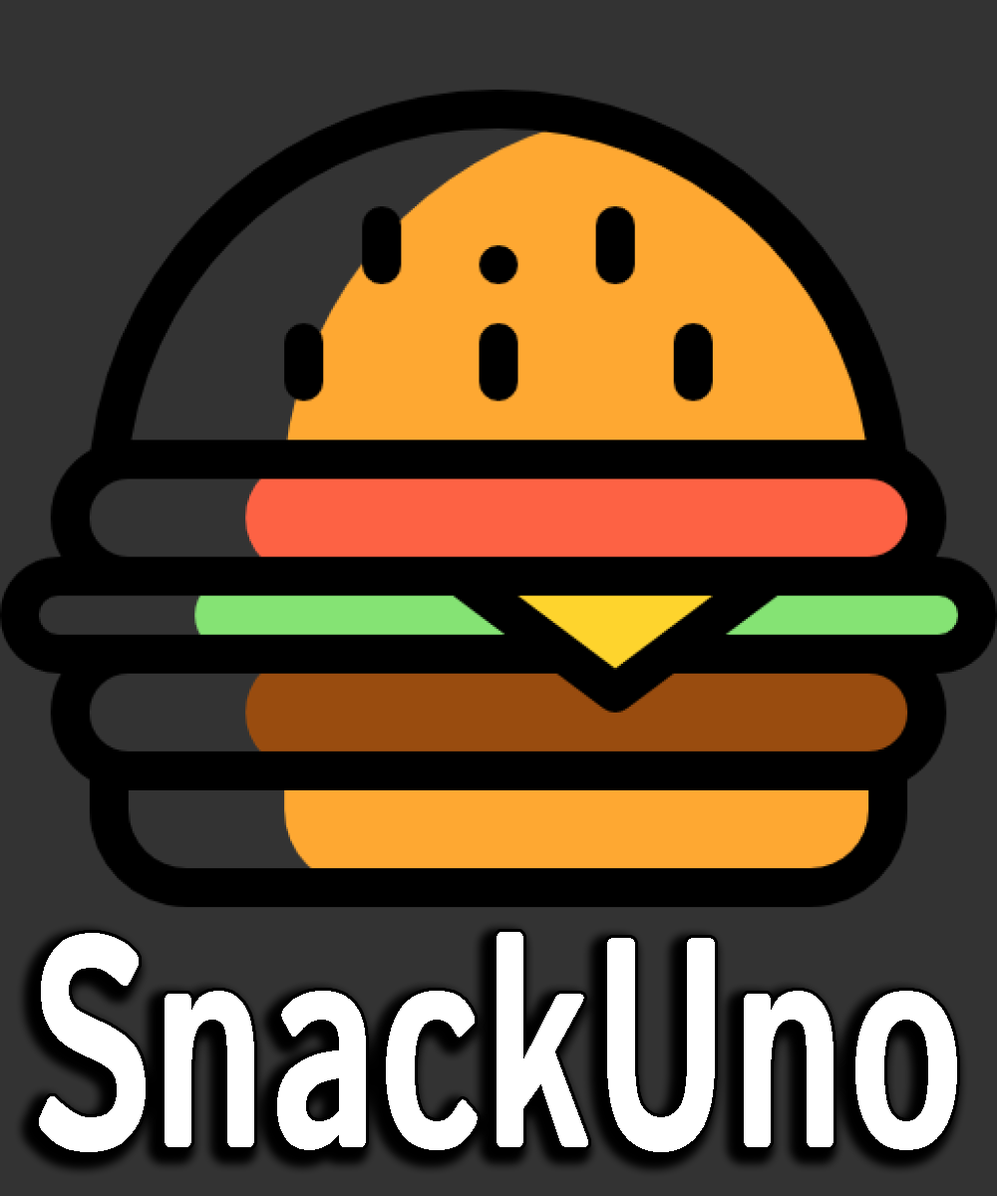
<style>
.page{position:relative;width:997px;height:1196px;background:#333333}
.page>*{position:absolute;margin:0}
.t1{font:299.1px "IstokWeb-Bold";color:#ffffff;scale:0.67 1}
</style>
<div class="page">
<p class="t1" style="left:39px;top:932px;width:918px;height:220px">SnackUno</p>
</div>
